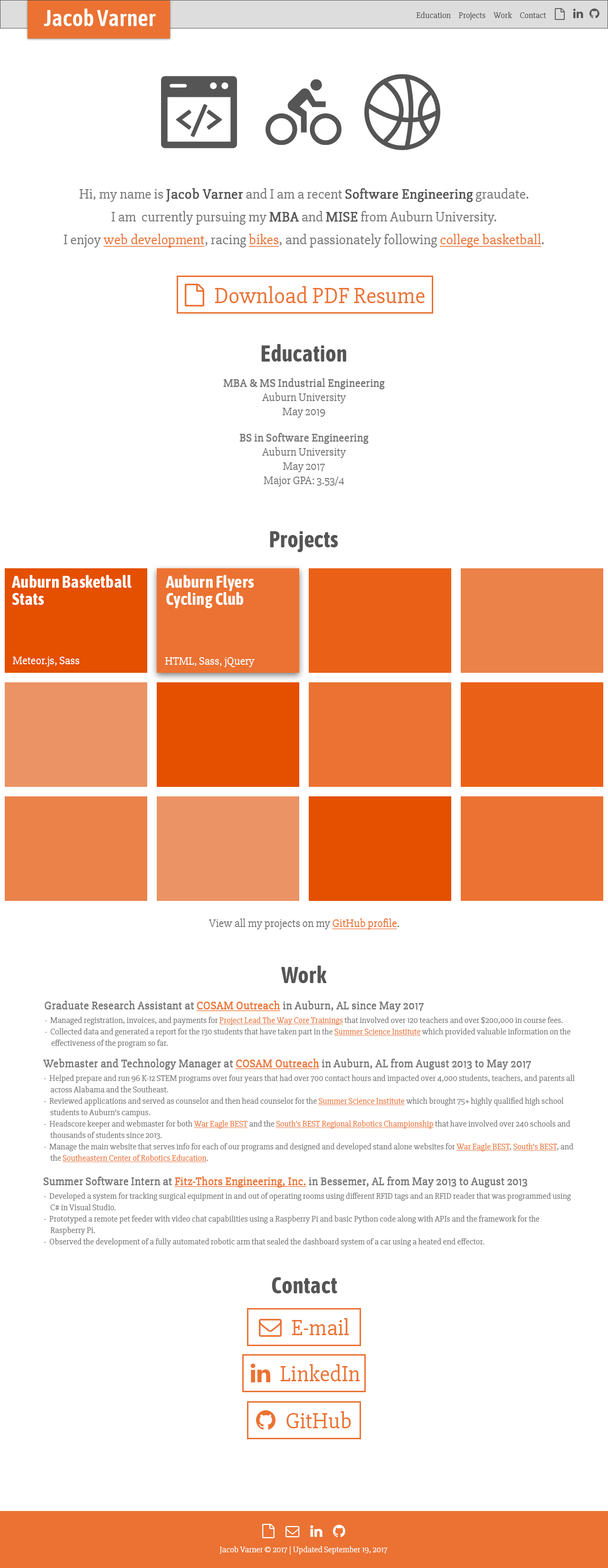
<style>
.page{position:relative;width:608px;height:1568px;background:#ffffff}
.page>*{position:absolute;margin:0}
.t1{font:22.8px "AsapCondensed-SemiBold";color:#ffffff}
.t2{font:8.6px "Slabo27px-Regular";color:#555555}
.t3{font:14.3px/22.8px "Slabo27px-Regular";color:#777777}
.t4{font:14.3px/8.6px "Slabo27px-Regular";color:#777777}
.t5{font:14.3px/8.6px "Slabo27px-Regular";color:#555555;font-weight:bold}
.t6{font:14.3px/22.8px "Slabo27px-Regular";color:#555555;font-weight:bold}
.t7{font:14.3px/22.8px "Slabo27px-Regular";color:#eb7232;text-decoration:underline}
.t8{font:22.8px "AsapCondensed-Bold";color:#555555}
.t9{font:11.4px/14.3px "Slabo27px-Regular";color:#777777;font-weight:bold}
.t10{font:11.4px/14.3px "Slabo27px-Regular";color:#777777}
.t11{font:17.1px/17.1px "AsapCondensed-Bold";color:#ffffff}
.t12{font:11.4px "Slabo27px-Regular";color:#ffffff}
.t13{font:11.4px "Slabo27px-Regular";color:#777777}
.t14{font:11.4px "Slabo27px-Regular";color:#eb7232;text-decoration:underline}
.t15{font:11.4px "Slabo27px-Regular";color:#777777;font-weight:bold}
.t16{font:11.4px "Slabo27px-Regular";color:#eb7232;font-weight:bold;text-decoration:underline}
.t17{font:8.6px/11.4px "Slabo27px-Regular";color:#777777}
.t18{font:8.6px/11.4px "Slabo27px-Regular";color:#eb7232;text-decoration:underline}
.t19{font:8.6px "Slabo27px-Regular";color:#ffffff}
</style>
<div class="page">
<p class="t1" style="left:44px;top:9px;width:112px;height:17px">Jacob Varner</p>
<p class="t2" style="left:416px;top:12px;width:130px;height:8px">Education     Projects     Work     Contact</p>
<p class="t3" style="left:64px;top:188px;width:480px;height:60px;text-align:center"><span class="t4">Hi, my name is </span><span class="t5">Jacob Varner</span><span class="t4"> and I am a recent </span><span class="t6">Software Engineering </span>graudate.<br>I am  currently pursuing my <span class="t6">MBA </span>and <span class="t6">MISE </span>from Auburn University.<br>I enjoy <span class="t7">web development</span>, racing <span class="t7">bikes</span>, and passionately following <span class="t7">college basketball</span>.</p>
<p class="t8" style="left:261px;top:344px;width:85px;height:18px">Education</p>
<p class="t9" style="left:223px;top:378px;width:162px;height:40px;text-align:center">MBA &amp; MS Industrial Engineering<br><span class="t10">Auburn University<br>May 2019</span></p>
<p class="t10" style="left:239px;top:433px;width:130px;height:54px;text-align:center"><span class="t9">BS in Software Engineering<br></span>Auburn University<br>May 2017<br>Major GPA: 3.53/4</p>
<p class="t8" style="left:270px;top:531px;width:68px;height:21px">Projects</p>
<p class="t11" style="left:12px;top:575px;width:120px;height:30px">Auburn Basketball<br>Stats</p>
<p class="t11" style="left:166px;top:575px;width:88px;height:33px">Auburn Flyers<br>Cycling Club</p>
<p class="t12" style="left:13px;top:657px;width:66px;height:10px">Meteor.js, Sass</p>
<p class="t12" style="left:165px;top:657px;width:90px;height:10px">HTML, Sass, jQuery</p>
<p class="t13" style="left:209px;top:918px;width:190px;height:11px">View all my projects on my <span class="t14">GitHub profile</span>.</p>
<p class="t8" style="left:281px;top:966px;width:46px;height:17px">Work</p>
<p class="t15" style="left:45px;top:1001px;width:379px;height:11px">Graduate Research Assistant at <span class="t16">COSAM Outreach</span> in Auburn, AL since May 2017</p>
<p class="t17" style="left:45px;top:1017px;width:526px;height:31px">-  Managed registration, invoices, and payments for <span class="t18">Project Lead The Way Core Trainings</span> that involved over 120 teachers and over $200,000 in course fees.<br>-  Collected data and generated a report for the 130 students that have taken part in the <span class="t18">Summer Science Institute</span> which provided valuable information on the<br>    effectiveness of the program so far.</p>
<p class="t15" style="left:43px;top:1059px;width:488px;height:11px">Webmaster and Technology Manager at <span class="t16">COSAM Outreach</span> in Auburn, AL from August 2013 to May 2017</p>
<p class="t17" style="left:44px;top:1075px;width:531px;height:87px">-  Helped prepare and run 96 K-12 STEM programs over four years that had over 700 contact hours and impacted over 4,000 students, teachers, and parents all<br>    across Alabama and the Southeast.<br>-  Reviewed applications and served as counselor and then head counselor for the <span class="t18">Summer Science Institute</span> which brought 75+ highly qualified high school<br>    students to Auburn’s campus.<br>-  Headscore keeper and webmaster for both <span class="t18">War Eagle BEST</span> and the <span class="t18">South’s BEST Regional Robotics Championship</span> that have involved over 240 schools and<br>    thousands of students since 2013.<br>-  Manage the main website that serves info for each of our programs and designed and developed stand alone websites for <span class="t18">War Eagle BEST</span>, <span class="t18">South’s BEST</span>, and<br>    the <span class="t18">Southeastern Center of Robotics Education</span>.</p>
<p class="t15" style="left:43px;top:1176px;width:484px;height:12px">Summer Software Intern at <span class="t16">Fitz-Thors Engineering, Inc.</span> in Bessemer, AL from May 2013 to August 2013</p>
<p class="t17" style="left:44px;top:1193px;width:527px;height:53px">-  Developed a system for tracking surgical equipment in and out of operating rooms using different RFID tags and an RFID reader that was programmed using<br>    C# in Visual Studio.<br>-  Prototyped a remote pet feeder with video chat capabilities using a Raspberry Pi and basic Python code along with APIs and the framework for the<br>    Raspberry Pi.<br>-  Observed the development of a fully automated robotic arm that sealed the dashboard system of a car using a heated end effector.</p>
<p class="t8" style="left:272px;top:1277px;width:65px;height:16px">Contact</p>
<p class="t19" style="left:220px;top:1546px;width:168px;height:9px">Jacob Varner © 2017 | Updated September 19, 2017</p>
</div>
